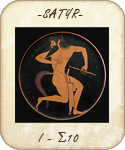
<style>
.page{position:relative;width:125px;height:150px}
.page>*{position:absolute;margin:0}
.t1{font:14px "FreestyleScript-Regular";letter-spacing:0.1em;color:#442d17}
.t2{font:14px "FreestyleScript-Regular";letter-spacing:0.1em;color:#503a23}
.t3{font:14px "TimesNewRomanPSMT";letter-spacing:0.1em;color:#503a23}
</style>
<div class="page">
<p class="t1" style="left:37px;top:8px;width:46px;height:11px">-SATYR-</p>
<p class="t2" style="left:38px;top:132px;width:41px;height:10px">I - <span class="t3">Σ</span>10</p>
</div>
